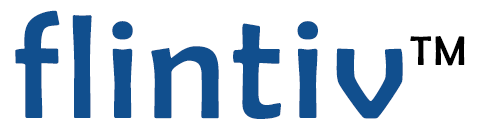
<style>
.page{position:relative;width:478px;height:132px;background:#ffffff}
.page>*{position:absolute;margin:0}
.t1{font:150px "BerlinSansFB-Reg";letter-spacing:0.05em;color:#114f8e}
.t2{font:41.7px "BerlinSansFB-Reg";letter-spacing:0.05em;color:#000000}
</style>
<div class="page">
<p class="t1" style="left:15px;top:10px;width:388px;height:109px">flintiv</p>
<p class="t2" style="left:410px;top:36px;width:55px;height:30px">TM</p>
</div>
